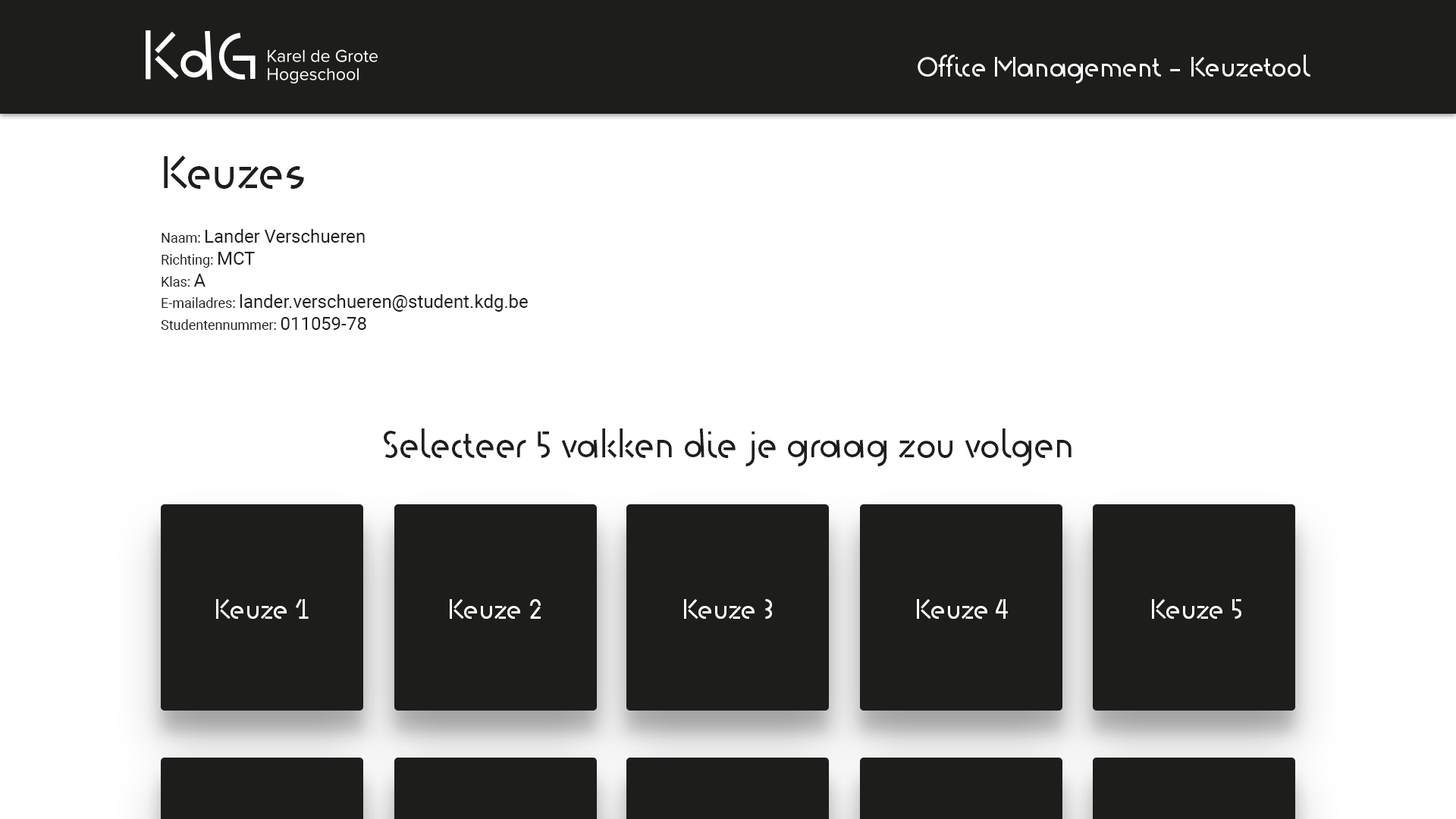
<style>
.page{position:relative;width:1456px;height:819px;background:#ffffff}
.page>*{position:absolute;margin:0}
.t1{font:27.3px "KdG-Regular";color:#fefefe}
.t2{font:18.2px "Roboto-Regular";color:#1d1d1b}
.t3{font:45.5px "KdG-Regular";color:#1d1d1b}
.t4{font:13.6px "Roboto-Regular";color:#1d1d1b}
.t5{font:36.4px "KdG-Regular";color:#1d1d1b}
</style>
<div class="page">
<p class="t1" style="left:918px;top:55px;width:392px;height:28px">Office Management - Keuzetool</p>
<p class="t2" style="left:161px;top:155px;width:367px;height:175px"><span class="t3">Keuzes<br><br></span><span class="t4">Naam: </span>Lander Verschueren<br><span class="t4">Richting: </span>MCT<br><span class="t4">Klas: </span>A<br><span class="t4">E-mailadres: </span>lander.verschueren@student.kdg.be<br><span class="t4">Studentennummer: </span>011059-78</p>
<p class="t5" style="left:384px;top:428px;width:688px;height:38px">Selecteer 5 vakken die je graag zou volgen</p>
<p class="t1" style="left:216px;top:599px;width:93px;height:20px">Keuze 1</p>
<p class="t1" style="left:450px;top:599px;width:91px;height:20px">Keuze 2</p>
<p class="t1" style="left:684px;top:599px;width:88px;height:20px">Keuze 3</p>
<p class="t1" style="left:917px;top:599px;width:91px;height:20px">Keuze 4</p>
<p class="t1" style="left:1152px;top:599px;width:89px;height:20px">Keuze 5</p>
</div>
